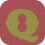
<style>
.page{position:relative;width:45px;height:45px;background:#a75157}
.page>*{position:absolute;margin:0}
.t1{font:50px "Saddlebag-Black";color:#949146}
</style>
<div class="page">
<p class="t1" style="left:4px;top:9px;width:36px;height:34px">Q</p>
</div>
